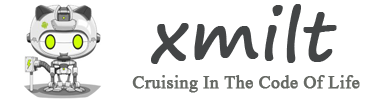
<style>
.page{position:relative;width:370px;height:100px;background:#ffffff}
.page>*{position:absolute;margin:0}
.t1{font:67px "SegoePrint";color:#434546;font-weight:bold}
.t2{font:22px "Aparajita";color:#666964;font-weight:bold}
</style>
<div class="page">
<p class="t1" style="left:151px;top:4px;width:186px;height:60px">xmilt</p>
<p class="t2" style="left:132px;top:75px;width:228px;height:18px">Cruising In The Code Of Life</p>
</div>
